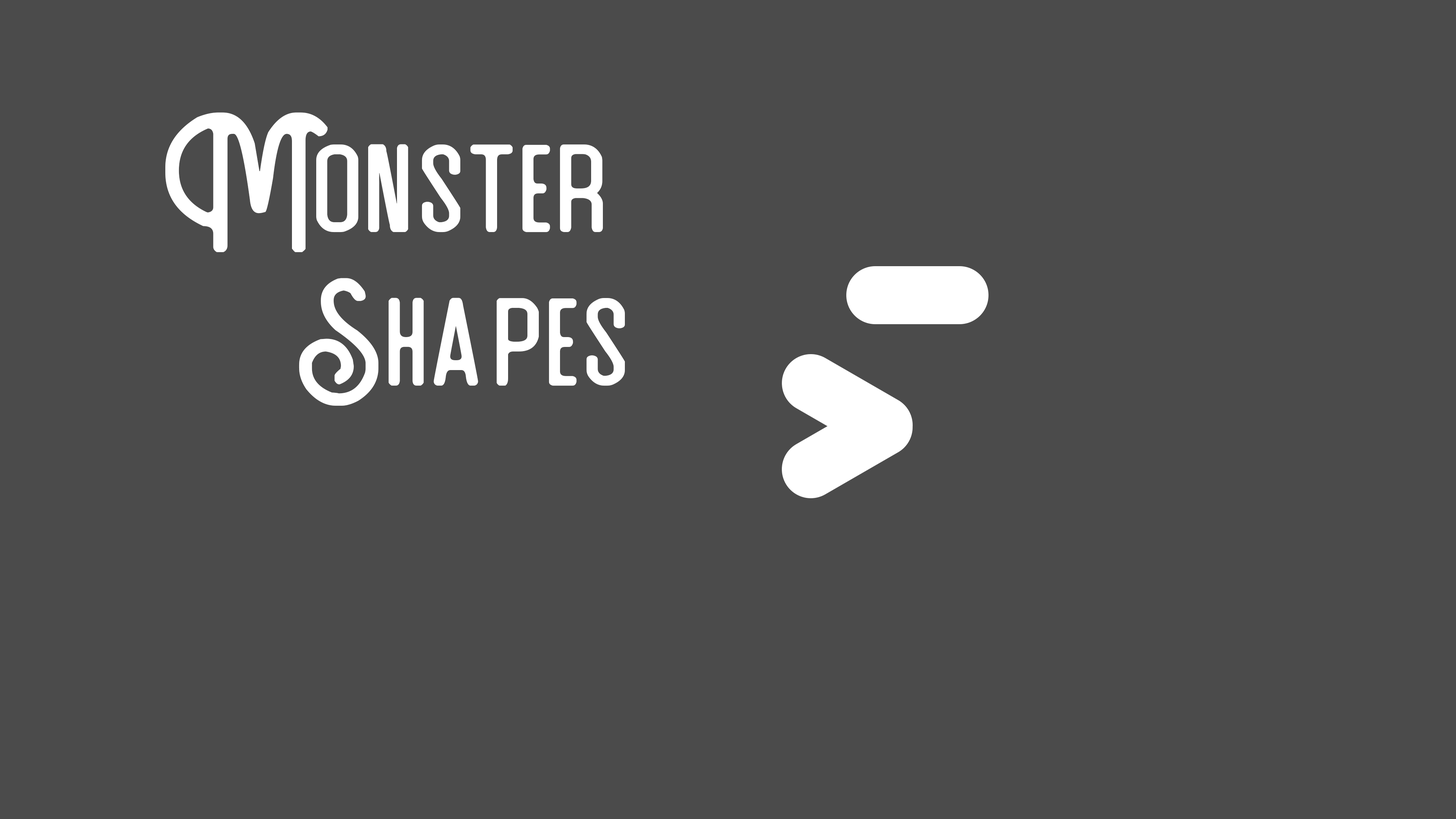
<style>
.page{position:relative;width:1456px;height:819px;background:#4b4b4b}
.page>*{position:absolute;margin:0}
.t1{font:137.6px "ArtefakCleanTypeface";color:#ffffff}
</style>
<div class="page">
<p class="t1" style="left:165px;top:112px;width:243px;height:140px">Mon</p>
<p class="t1" style="left:422px;top:144px;width:181px;height:88px">ster</p>
<p class="t1" style="left:299px;top:278px;width:179px;height:128px">Sha</p>
<p class="t1" style="left:496px;top:298px;width:129px;height:88px">pes</p>
</div>
